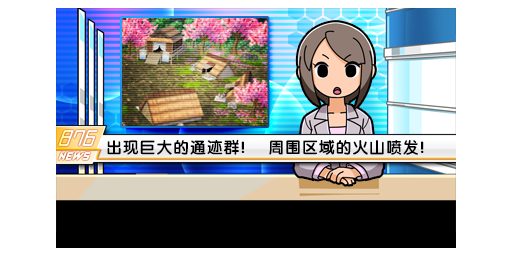
<style>
.page{position:relative;width:512px;height:256px;background:#ffffff}
.page>*{position:absolute;margin:0}
.t1{font:16px "FZY4K--GBK1-0";letter-spacing:0.05em;color:#000000}
</style>
<div class="page">
<p class="t1" style="left:107px;top:139px;width:317px;height:16px">出现巨大的通迹群!　 周围区域的火山喷发!</p>
</div>
